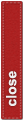
<style>
.page{position:relative;width:23px;height:120px}
.page>*{position:absolute;margin:0}
.t1{font:14px "Arial-BoldMT";color:#eeeeee}
</style>
<div class="page">
<p class="t1" style="left:6px;top:71px;width:11px;height:35px;rotate:-90deg">close</p>
</div>
